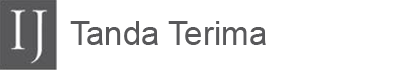
<style>
.page{position:relative;width:400px;height:70px;background:#ffffff}
.page>*{position:absolute;margin:0}
.t1{font:32.7px "ArialMT";color:#58585a}
</style>
<div class="page">
<p class="t1" style="left:70px;top:21px;width:196px;height:24px">Tanda Terima</p>
</div>
